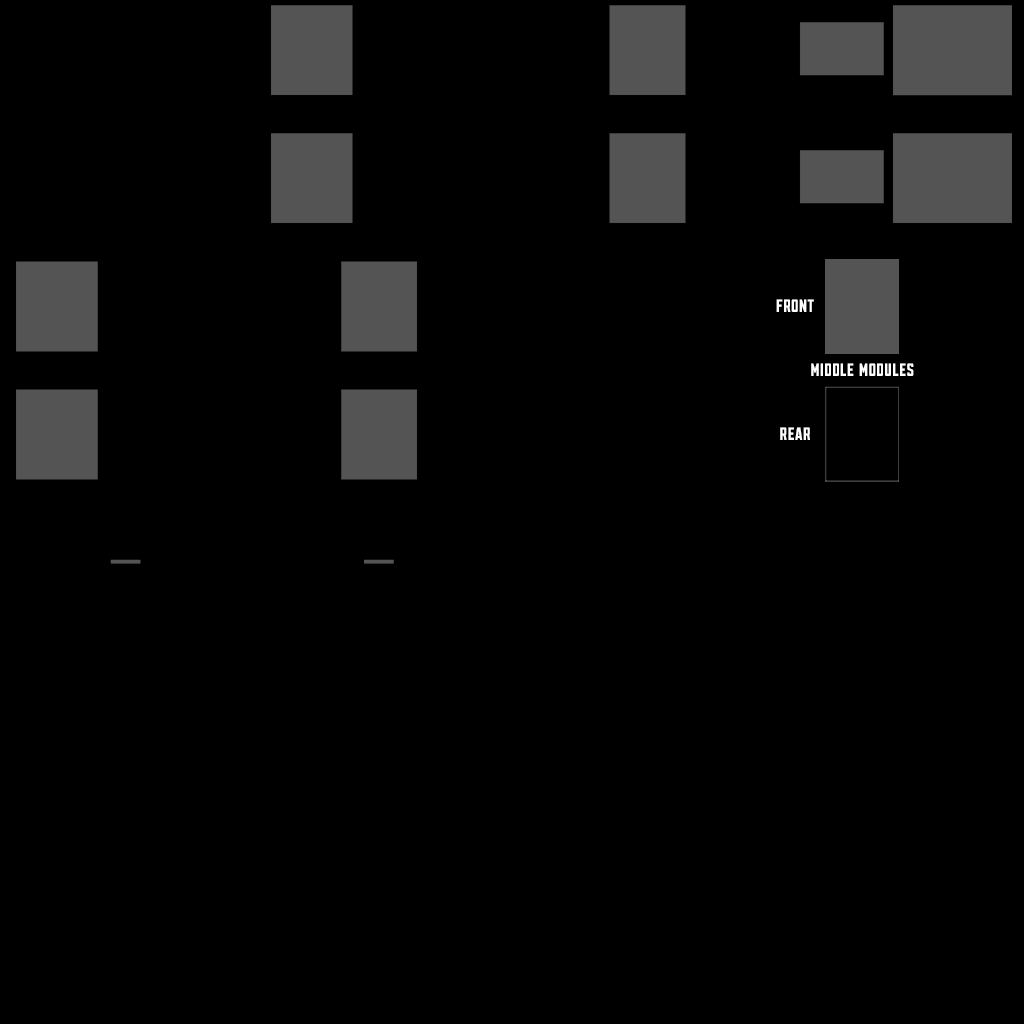
<style>
.page{position:relative;width:1024px;height:1024px;background:#000000}
.page>*{position:absolute;margin:0}
.t1{font:21px "SanhurstCondensed-Regular";color:#ffffff}
</style>
<div class="page">
<p class="t1" style="left:776px;top:299px;width:38px;height:13px">FRONT</p>
<p class="t1" style="left:811px;top:363px;width:103px;height:13px">Middle Modules</p>
<p class="t1" style="left:780px;top:427px;width:30px;height:13px">Rear</p>
</div>
